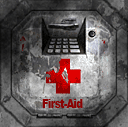
<style>
.page{position:relative;width:128px;height:127px}
.page>*{position:absolute;margin:0}
.t1{font:12px "Arial-Black";letter-spacing:-0.05em;color:#8b0202;scale:0.8 1}
</style>
<div class="page">
<p class="t1" style="left:42px;top:99px;width:41px;height:9px">First-Aid</p>
</div>
